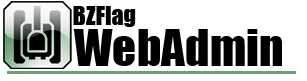
<style>
.page{position:relative;width:307px;height:81px;background:#ffffff}
.page>*{position:absolute;margin:0}
.t1{font:24px "Impact";color:#000000}
.t2{font:47.2px "Impact";color:#000000}
</style>
<div class="page">
<p class="t1" style="left:73px;top:6px;width:63px;height:21px">BZFlag</p>
<p class="t2" style="left:73px;top:29px;width:209px;height:37px">WebAdmin</p>
</div>
